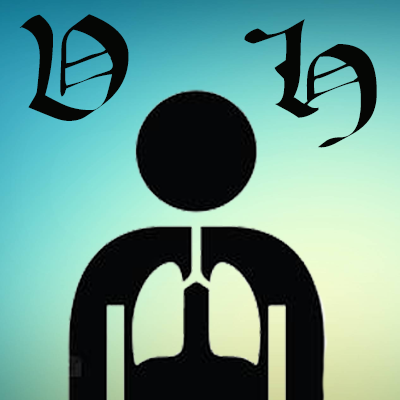
<style>
.page{position:relative;width:400px;height:400px}
.page>*{position:absolute;margin:0}
.t1{font:133.3px "OPENCLASSIC";color:#050604}
</style>
<div class="page">
<p class="t1" style="left:19px;top:14px;width:358px;height:134px">V  H</p>
</div>
